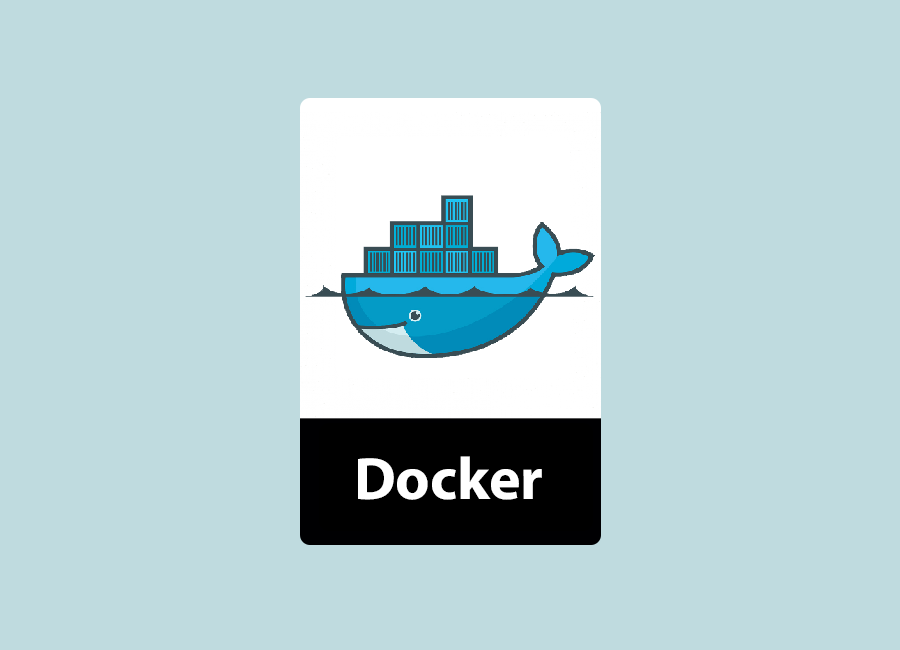
<style>
.page{position:relative;width:900px;height:650px;background:#bfdbdf}
.page>*{position:absolute;margin:0}
.t1{font:60px "MyriadConceptRoman-Bold";color:#ffffff}
</style>
<div class="page">
<p class="t1" style="left:358px;top:456px;width:184px;height:44px">Docker</p>
</div>
